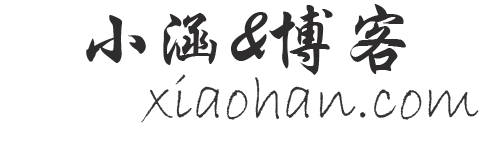
<style>
.page{position:relative;width:480px;height:150px;background:#ffffff}
.page>*{position:absolute;margin:0}
.t1{font:75px "STXingkai";color:#2e2c2c}
.t2{font:64.1px "BradleyHandITC";color:#333333}
</style>
<div class="page">
<p class="t1" style="left:86px;top:4px;width:320px;height:71px">小涵&amp;博客</p>
<p class="t2" style="left:141px;top:74px;width:338px;height:49px">xiaohan.com</p>
</div>
